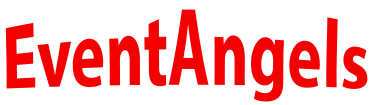
<style>
.page{position:relative;width:375px;height:105px;background:#ffffff}
.page>*{position:absolute;margin:0}
.t1{font:62.5px "MyriadPro-Bold";color:#f50000}
</style>
<div class="page">
<p class="t1" style="left:5px;top:9px;width:363px;height:93px">EventAngels</p>
</div>
